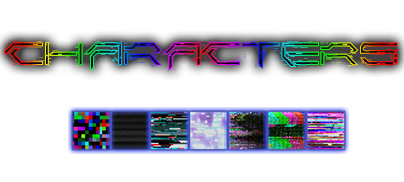
<style>
.page{position:relative;width:404px;height:182px;background:#ffffff}
.page>*{position:absolute;margin:0}
.t1{font:30px "Corruptor-LDR"}
</style>
<div class="page">
<p class="t1" style="left:3px;top:41px;width:397px;height:30px">CHARACTERS</p>
</div>
